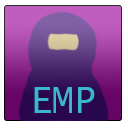
<style>
.page{position:relative;width:128px;height:128px}
.page>*{position:absolute;margin:0}
.t1{font:36px "LucidaSans-Typewriter";color:#3cb6d0}
</style>
<div class="page">
<p class="t1" style="left:34px;top:87px;width:61px;height:26px">EMP</p>
</div>
